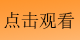
<style>
.page{position:relative;width:80px;height:40px}
.page>*{position:absolute;margin:0}
.t1{font:18px "SimSun";color:#0b0804}
</style>
<div class="page">
<p class="t1" style="left:4px;top:12px;width:71px;height:17px">点击观看</p>
</div>
